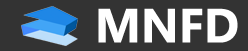
<style>
.page{position:relative;width:248px;height:51px;background:#333333}
.page>*{position:absolute;margin:0}
.t1{font:48px "MicrosoftTaiLe-Bold";color:#ffffff}
</style>
<div class="page">
<p class="t1" style="left:98px;top:8px;width:140px;height:35px">MNFD</p>
</div>
